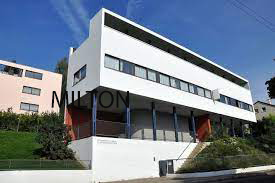
<style>
.page{position:relative;width:275px;height:183px}
.page>*{position:absolute;margin:0}
.t1{font:25px "MyriadPro-Regular";color:#0b0b0b}
</style>
<div class="page">
<p class="t1" style="left:51px;top:90px;width:78px;height:18px">MILTON</p>
</div>
